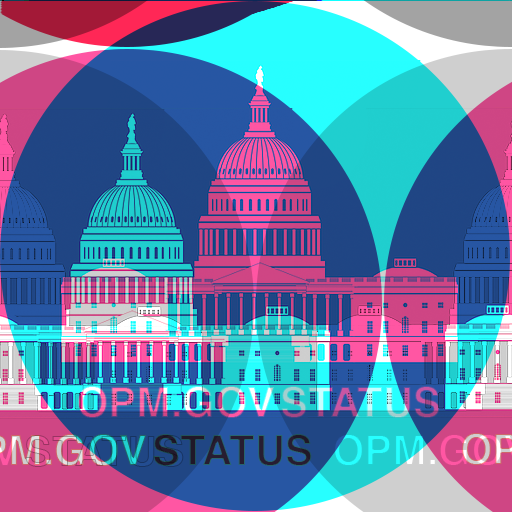
<style>
.page{position:relative;width:512px;height:512px}
.page>*{position:absolute;margin:0}
.t1{font:41.7px "Helvetica-Bold"}
</style>
<div class="page">
<p class="t1" style="left:78px;top:385px;width:197px;height:32px">OPM.GOV</p>
<p class="t1" style="left:281px;top:385px;width:159px;height:32px">STATUS</p>
</div>
